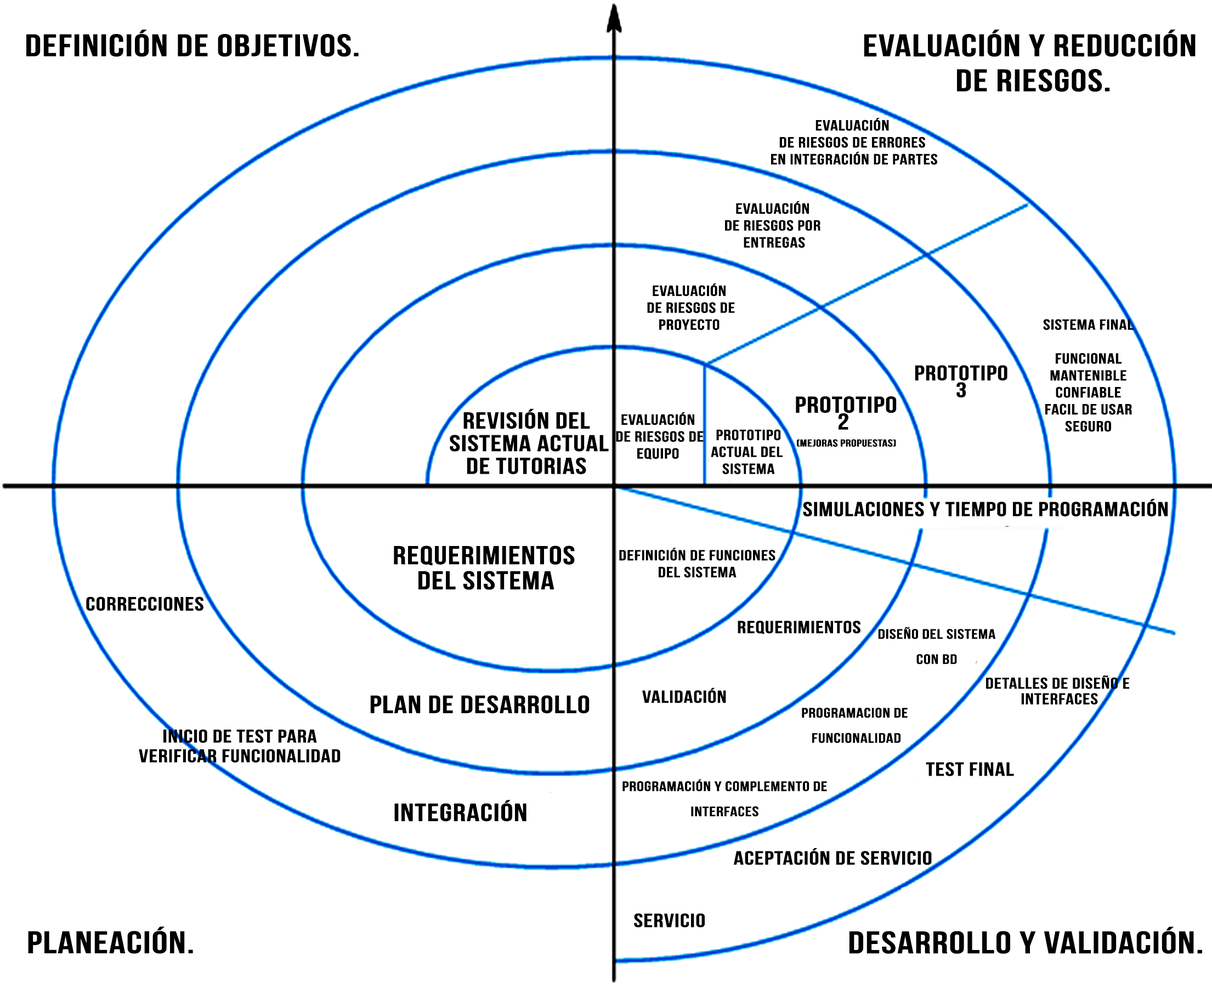
<style>
.page{position:relative;width:1212px;height:984px;background:#ffffff}
.page>*{position:absolute;margin:0}
.t1{font:31.2px "BebasNeue";color:#000000;font-weight:bold;scale:1.28 1}
.t2{font:31.2px/38.7px "BebasNeue";color:#000000;font-weight:bold;scale:1.28 1}
.t3{font:14.7px/20.6px "BebasNeue";color:#000000;font-weight:bold;scale:1.28 1}
.t4{font:21.1px/20.6px "BebasNeue";color:#000000;font-weight:bold;scale:1.28 1}
.t5{font:10.1px/20.6px "BebasNeue";color:#000000;font-weight:bold;scale:1.28 1}
.t6{font:23px/20.6px "BebasNeue";color:#000000;font-weight:bold;scale:1.28 1}
.t7{font:23px/26.3px "BebasNeue";color:#000000;font-weight:bold;scale:1.28 1}
.t8{font:20.2px "BebasNeue";color:#000000;font-weight:bold;scale:1.28 1}
.t9{font:25.7px/28.8px "BebasNeue";color:#000000;font-weight:bold;scale:1.28 1}
.t10{font:19.3px "BebasNeue";color:#000000;font-weight:bold;scale:1.28 1}
.t11{font:17.4px "BebasNeue";color:#000000;font-weight:bold;scale:1.28 1}
.t12{font:13.8px/28.8px "BebasNeue";color:#000000;font-weight:bold;scale:1.28 1}
.t13{font:15.6px/19.2px "BebasNeue";color:#000000;font-weight:bold;scale:1.28 1}
.t14{font:24.8px "BebasNeue";color:#000000;font-weight:bold;scale:1.28 1}
.t15{font:18.4px/23.3px "BebasNeue";color:#000000;font-weight:bold;scale:1.28 1}
</style>
<div class="page">
<p class="t1" style="left:26px;top:30px;width:333px;height:27px">Definición de objetivos.</p>
<p class="t2" style="left:864px;top:30px;width:331px;height:62px;text-align:center">Evaluación y reducción <br>de riesgos.</p>
<p class="t3" style="left:771px;top:118px;width:166px;height:47px;text-align:center">Evaluación <br>de riesgos DE ERRORES <br>EN Integración DE PARTES</p>
<p class="t3" style="left:725px;top:201px;width:95px;height:47px;text-align:center">Evaluación <br>de riesgos POR <br>ENTREGAS</p>
<p class="t3" style="left:647px;top:283px;width:88px;height:47px;text-align:center">Evaluación <br>de riesgos de<br>PROYECTO</p>
<p class="t3" style="left:1043px;top:319px;width:90px;height:113px;text-align:center">sISTEMA FINAL<br><br>FUNCIONAL<br>MANTENIBLE<br>CONFIABLE<br>FACIL DE USAR<br>SEGURO</p>
<p class="t4" style="left:915px;top:365px;width:92px;height:32px;text-align:center">prototipo<br>3</p>
<p class="t5" style="left:796px;top:396px;width:100px;height:51px;text-align:center"><span class="t6">prototipo<br>2 <br></span>(mejoras propuestas)</p>
<p class="t7" style="left:450px;top:408px;width:159px;height:66px;text-align:center">Revisión del <br>sistema actual<br>de tutorias</p>
<p class="t3" style="left:616px;top:412px;width:87px;height:47px;text-align:center">Evaluación <br>de riesgos de<br>equipo</p>
<p class="t3" style="left:711px;top:429px;width:71px;height:45px;text-align:center">prototipo<br>actual del <br>sistema</p>
<p class="t8" style="left:803px;top:499px;width:365px;height:17px">Simulaciones y tiempo de programación</p>
<p class="t9" style="left:394px;top:546px;width:181px;height:44px;text-align:center">Requerimientos <br>del sistema</p>
<p class="t3" style="left:619px;top:548px;width:156px;height:30px;text-align:center">Definición de funciones <br>del sistema</p>
<p class="t10" style="left:86px;top:597px;width:117px;height:14px">correcciones</p>
<p class="t11" style="left:737px;top:621px;width:123px;height:13px">requerimientos</p>
<p class="t12" style="left:878px;top:627px;width:118px;height:37px;text-align:center">diseño del sistema<br>con bd</p>
<p class="t13" style="left:986px;top:675px;width:143px;height:30px;text-align:center">DETALLES DE DISEÑO E <br>INTERFACES</p>
<p class="t11" style="left:642px;top:688px;width:84px;height:15px">validación</p>
<p class="t14" style="left:370px;top:695px;width:219px;height:19px">plan de desarrollo</p>
<p class="t12" style="left:802px;top:708px;width:105px;height:35px;text-align:center">programacion de<br> funcionalidad</p>
<p class="t15" style="left:139px;top:729px;width:201px;height:34px;text-align:center">Inicio de test para <br>verificar funcionalidad</p>
<p class="t10" style="left:925px;top:762px;width:89px;height:14px">TEST FINAL</p>
<p class="t12" style="left:622px;top:779px;width:205px;height:38px;text-align:center">programación y complemento de<br>interfaces</p>
<p class="t14" style="left:394px;top:800px;width:132px;height:22px">Integración</p>
<p class="t10" style="left:734px;top:848px;width:197px;height:17px">ACEPTACIÓN DE servicio</p>
<p class="t10" style="left:634px;top:913px;width:71px;height:15px">servicio</p>
<p class="t1" style="left:28px;top:927px;width:165px;height:27px">Planeación.</p>
<p class="t1" style="left:849px;top:927px;width:353px;height:27px">Desarrollo y validación.</p>
</div>
